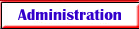
<style>
.page{position:relative;width:139px;height:29px;background:#ffffff}
.page>*{position:absolute;margin:0}
.t1{font:16px "BritannicBold";color:#3300cc}
</style>
<div class="page">
<p class="t1" style="left:18px;top:9px;width:103px;height:11px">Administration</p>
</div>
